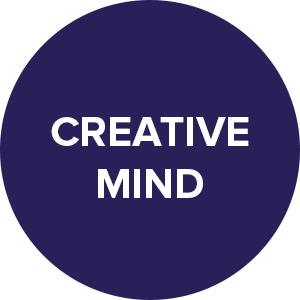
<style>
.page{position:relative;width:300px;height:300px;background:#282058}
.page>*{position:absolute;margin:0}
.t1{font:43px "ProximaNova-Bold";color:#fefdff}
</style>
<div class="page">
<p class="t1" style="left:51px;top:117px;width:198px;height:81px;text-align:center">CREATIVE<br>MIND</p>
</div>
